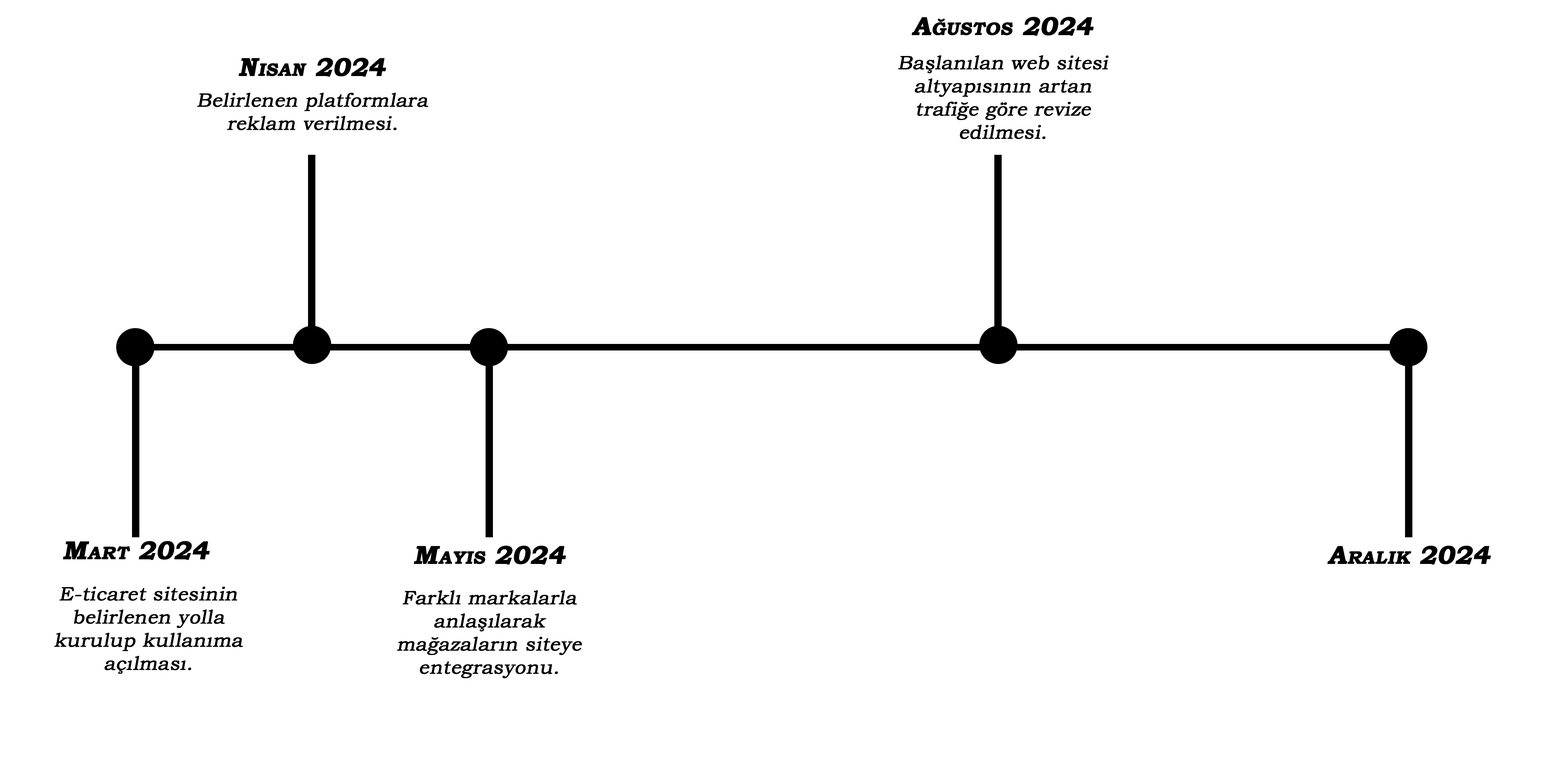
<style>
.page{position:relative;width:1544px;height:772px;background:#ffffff}
.page>*{position:absolute;margin:0}
.t1{font:25.7px "BookmanOldStyle-Bold";color:#000000;font-variant:small-caps;font-weight:bold;font-style:italic}
.t2{font:19.3px "BookmanOldStyle";color:#000000;font-weight:bold;font-style:italic}
</style>
<div class="page">
<p class="t1" style="left:912px;top:17px;width:182px;height:19px">Ağustos 2024</p>
<p class="t1" style="left:239px;top:58px;width:147px;height:19px">Nisan 2024</p>
<p class="t2" style="left:898px;top:55px;width:211px;height:84px;text-align:center">Başlanılan web sitesi altyapısının artan trafiğe göre revize edilmesi.</p>
<p class="t2" style="left:197px;top:93px;width:231px;height:37px;text-align:center">Belirlenen platformlara reklam verilmesi.</p>
<p class="t1" style="left:63px;top:541px;width:147px;height:19px">Mart 2024</p>
<p class="t1" style="left:414px;top:546px;width:152px;height:19px">Mayıs 2024</p>
<p class="t1" style="left:1328px;top:546px;width:163px;height:19px">Aralık 2024</p>
<p class="t2" style="left:54px;top:586px;width:189px;height:88px;text-align:center">E-ticaret sitesinin belirlenen yolla kurulup kullanıma açılması.</p>
<p class="t2" style="left:397px;top:590px;width:185px;height:88px;text-align:center">Farklı markalarla anlaşılarak mağazaların siteye entegrasyonu.</p>
</div>
